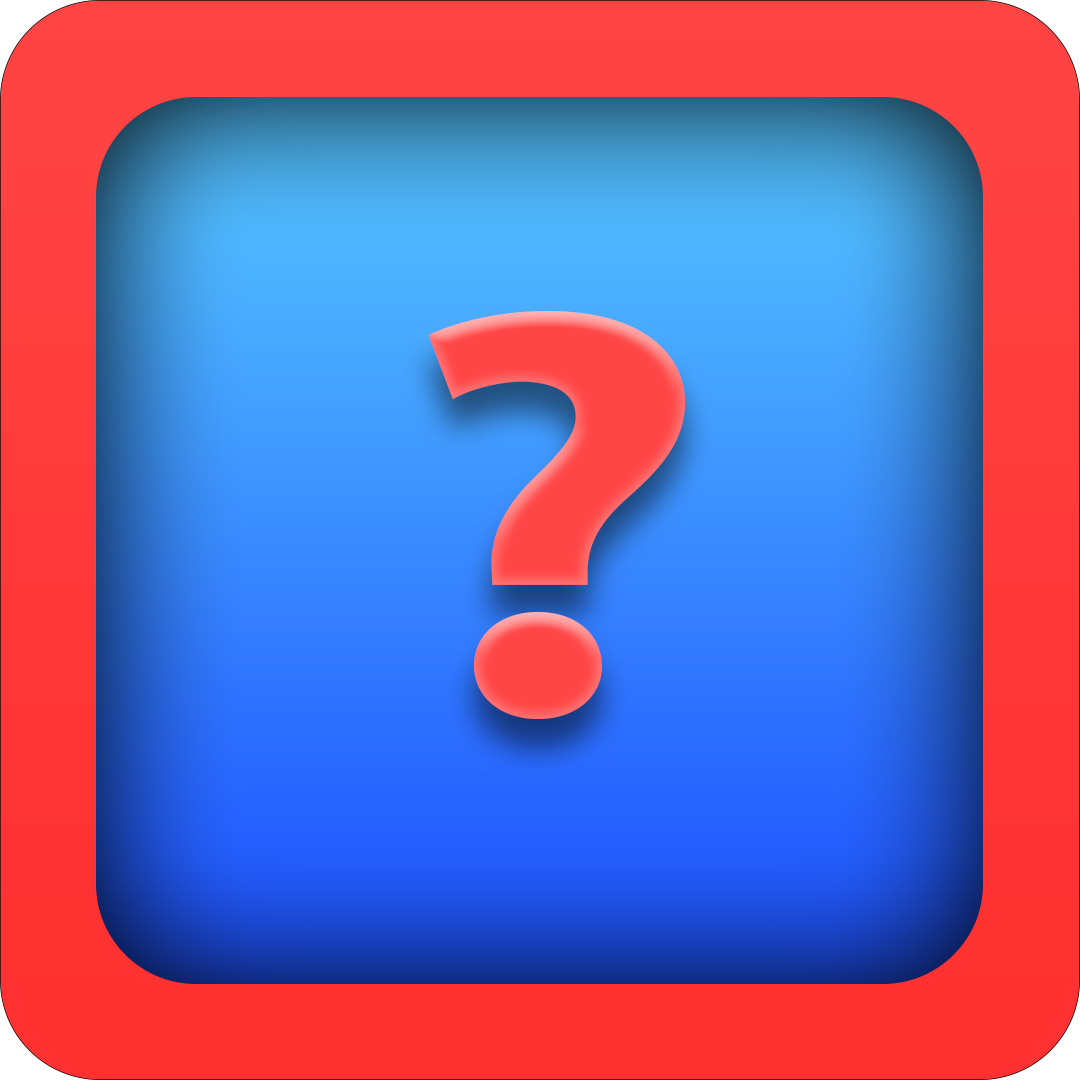
<style>
.page{position:relative;width:1080px;height:1080px}
.page>*{position:absolute;margin:0}
.t1{font:587.8px "MyriadPro-Bold";color:#ff4646;scale:1.22 1}
</style>
<div class="page">
<p class="t1" style="left:428px;top:311px;width:257px;height:408px">?</p>
</div>
